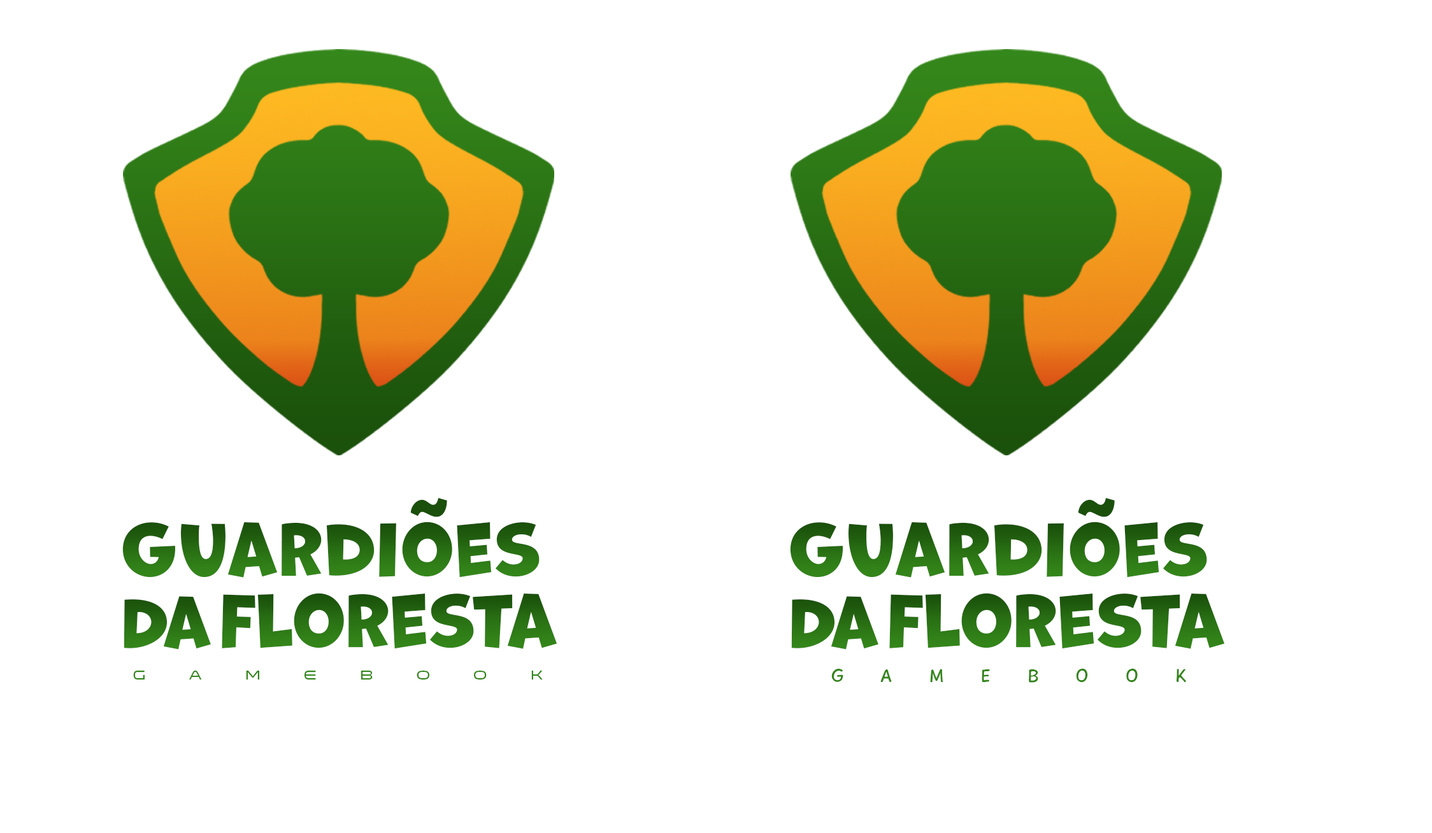
<style>
.page{position:relative;width:1432px;height:833px;background:#ffffff}
.page>*{position:absolute;margin:0}
.t1{font:68.2px "Marvin";letter-spacing:-0.001em;color:#1b510b}
.t2{font:68.2px "Marvin";letter-spacing:0.03em;color:#276a12}
.t3{font:68.2px "Marvin";letter-spacing:0.019em;color:#276a12}
.t4{font:68.2px "Marvin";letter-spacing:-0.001em;color:#276a12}
.t5{font:68.2px "Marvin";letter-spacing:0.02em;color:#276a12}
.t6{font:65.3px "Marvin";letter-spacing:-0.03em;color:#276a12}
.t7{font:12.9px "Venera700";letter-spacing:3.37em;color:#33851a}
.t8{font:11.6px "Venera900";letter-spacing:3.03em;color:#33851a}
.t9{font:18.6px "PlaytimeWithHotToddies";letter-spacing:2em;color:#33851a}
</style>
<div class="page">
<p class="t1" style="left:410px;top:497px;width:37px;height:20px">~</p>
<p class="t1" style="left:1077px;top:497px;width:37px;height:20px">~</p>
<p class="t2" style="left:122px;top:522px;width:417px;height:56px">Gua<span class="t3">rd</span>ioes</p>
<p class="t2" style="left:790px;top:522px;width:417px;height:56px">Gua<span class="t3">rd</span>ioes</p>
<p class="t4" style="left:222px;top:593px;width:335px;height:56px">Flo<span class="t5">res</span><span class="t3">ta</span></p>
<p class="t4" style="left:889px;top:593px;width:336px;height:56px">Flo<span class="t5">res</span><span class="t3">ta</span></p>
<p class="t6" style="left:124px;top:596px;width:87px;height:54px">Da</p>
<p class="t6" style="left:791px;top:596px;width:87px;height:54px">Da</p>
<p class="t7" style="left:133px;top:671px;width:410px;height:8px"><span class="t8">  </span>GameBook</p>
<p class="t9" style="left:831px;top:669px;width:355px;height:14px"><span class="t8">  </span>GAMEBOOK</p>
</div>
